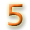
<style>
.page{position:relative;width:30px;height:30px;background:#ffffff}
.page>*{position:absolute;margin:0}
.t1{font:30px "Verdana"}
</style>
<div class="page">
<p class="t1" style="left:8px;top:4px;width:15px;height:22px">5</p>
</div>
